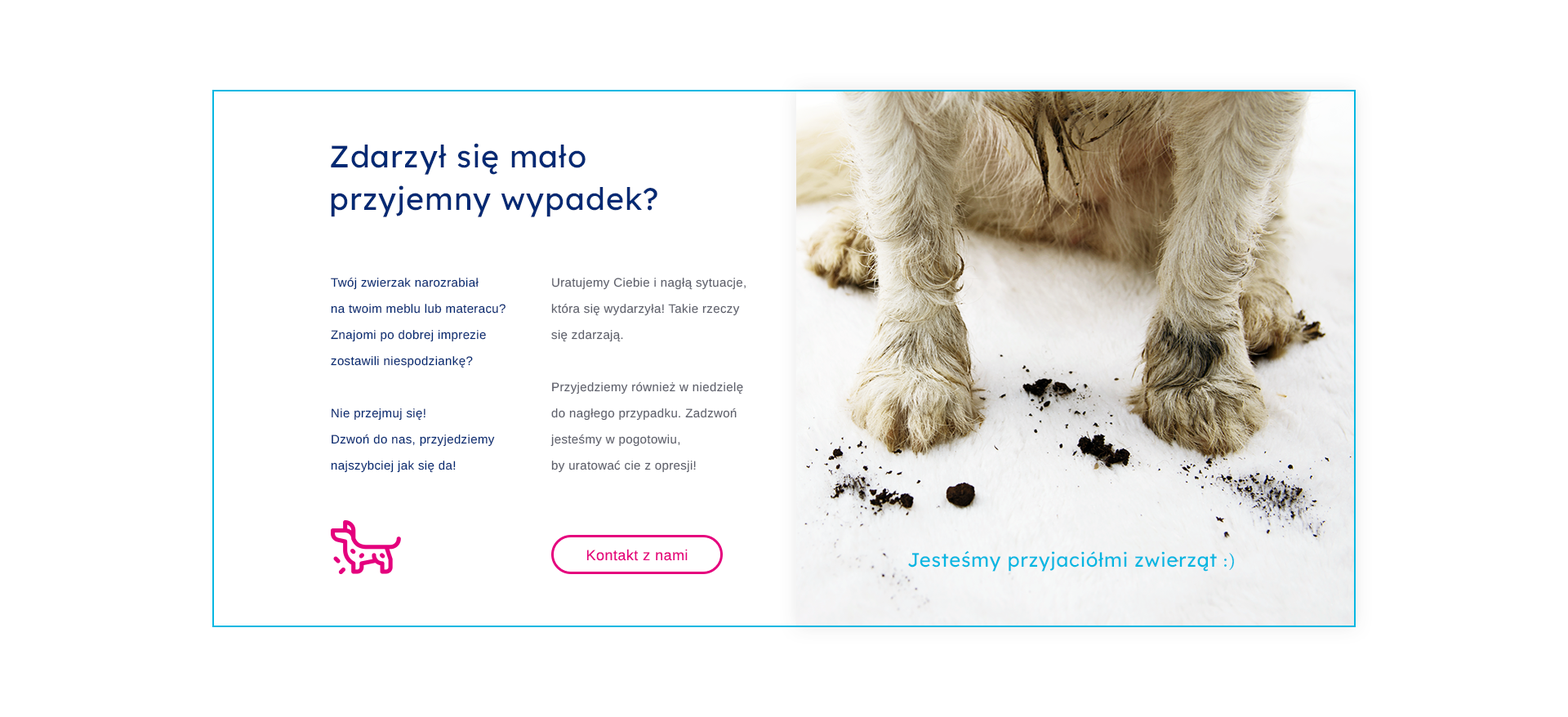
<style>
.page{position:relative;width:1568px;height:717px;background:#ffffff}
.page>*{position:absolute;margin:0}
.t1{font:31px/42.5px "LexendDeca-Regular";letter-spacing:0.025em;color:#012973}
.t2{font:12.3px/26.2px "Arimo";letter-spacing:0.025em;color:#012973}
.t3{font:12.3px/26.2px "Arimo";letter-spacing:0.025em;color:#5d5f6b}
.t4{font:14.7px "Arimo";letter-spacing:0.025em;color:#e5007d}
.t5{font:19.6px "LexendDeca-Regular";letter-spacing:0.025em;color:#06b7e2}
.t6{font:19.6px "MinionPro-Regular";letter-spacing:0.025em;color:#06b7e2}
</style>
<div class="page">
<p class="t1" style="left:331px;top:143px;width:326px;height:74px">Zdarzył się mało<br>przyjemny wypadek?</p>
<p class="t2" style="left:331px;top:277px;width:175px;height:196px">Twój zwierzak narozrabiał <br>na twoim meblu lub materacu?<br>Znajomi po dobrej imprezie zostawili niespodziankę?<br><br>Nie przejmuj się! <br>Dzwoń do nas, przyjedziemy najszybciej jak się da!</p>
<p class="t3" style="left:550px;top:278px;width:196px;height:195px">Uratujemy Ciebie i nagłą sytuacje, która się wydarzyła! Takie rzeczy się zdarzają. <br><br>Przyjedziemy również w niedzielę do nagłego przypadku. Zadzwoń jesteśmy w pogotowiu, <br>by uratować cie z opresji!</p>
<p class="t4" style="left:587px;top:549px;width:101px;height:12px">Kontakt z nami</p>
<p class="t5" style="left:908px;top:550px;width:326px;height:22px">Jesteśmy przyjaciółmi zwierząt <span class="t6">:)</span></p>
</div>
